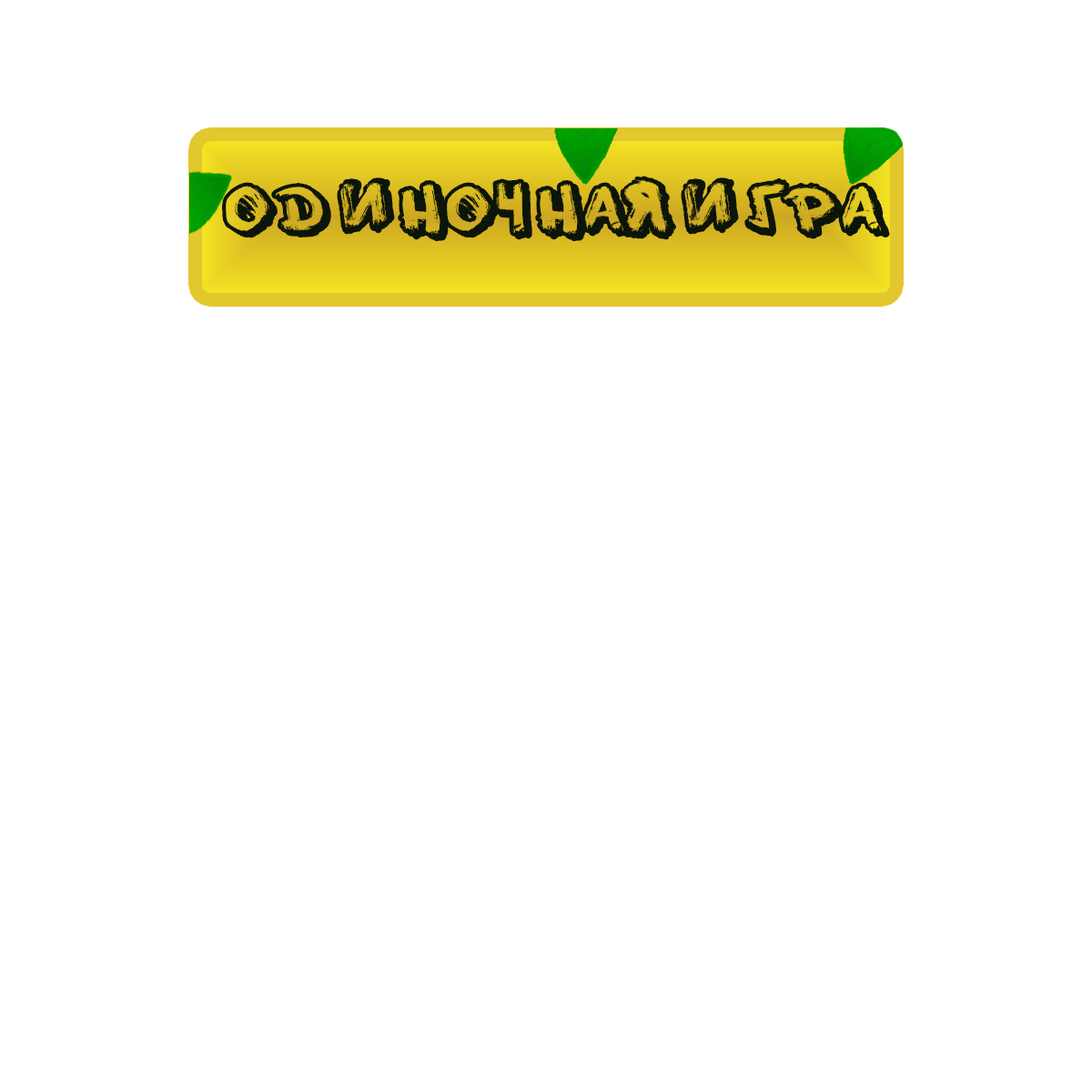
<style>
.page{position:relative;width:1092px;height:1092px;background:#ffffff}
.page>*{position:absolute;margin:0}
.t1{font:75.8px "ThisNight";letter-spacing:0.025em;color:#0c1509}
</style>
<div class="page">
<p class="t1" style="left:222px;top:176px;width:668px;height:65px">одиночнаяигра</p>
</div>
